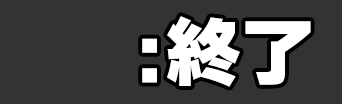
<style>
.page{position:relative;width:342px;height:104px;background:#333333}
.page>*{position:absolute;margin:0}
.t1{font:75px "WanpakuRuika-08";color:#ffffff}
</style>
<div class="page">
<p class="t1" style="left:142px;top:16px;width:169px;height:71px">:終了</p>
</div>
